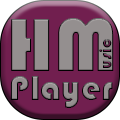
<style>
.page{position:relative;width:120px;height:120px;background:#711f4f}
.page>*{position:absolute;margin:0}
.t1{font:78px "Bauhaus93";color:#948f8f}
.t2{font:17px "Bauhaus93"}
.t3{font:36px "Bauhaus93";color:#948f8f}
</style>
<div class="page">
<p class="t1" style="left:11px;top:18px;width:103px;height:53px">HM</p>
<p class="t2" style="left:99px;top:39px;width:13px;height:29px;rotate:-90deg">usic</p>
<p class="t3" style="left:10px;top:76px;width:103px;height:32px">Player</p>
</div>
